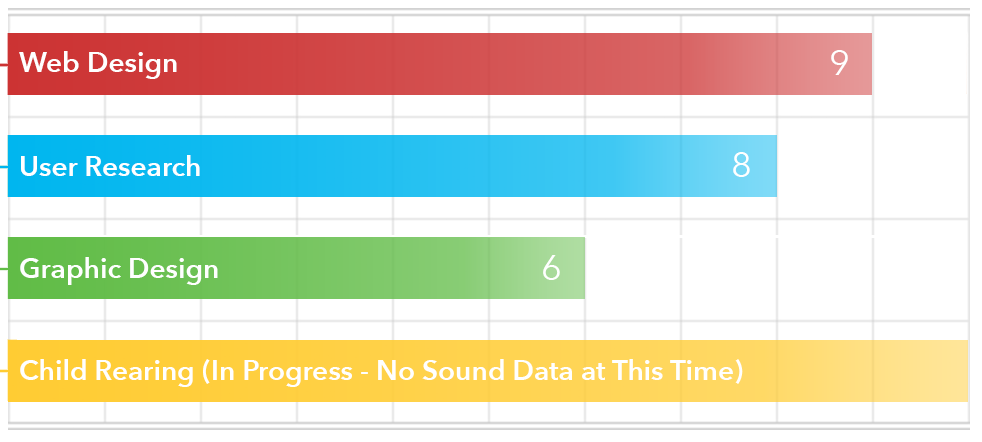
<style>
.page{position:relative;width:982px;height:442px;background:#ffffff}
.page>*{position:absolute;margin:0}
.t1{font:28px "AvenirNext-DemiBold";color:#ffffff}
.t2{font:36px "AvenirNext-Regular";color:#ffffff}
</style>
<div class="page">
<p class="t1" style="left:19px;top:51px;width:158px;height:28px">Web Design</p>
<p class="t2" style="left:831px;top:50px;width:17px;height:25px">9</p>
<p class="t1" style="left:21px;top:155px;width:179px;height:21px">User Research</p>
<p class="t2" style="left:733px;top:152px;width:17px;height:25px">8</p>
<p class="t1" style="left:20px;top:257px;width:198px;height:28px">Graphic Design</p>
<p class="t2" style="left:543px;top:255px;width:17px;height:25px">6</p>
<p class="t1" style="left:20px;top:359px;width:723px;height:28px">Child Rearing (In Progress - No Sound Data at This Time)</p>
</div>
